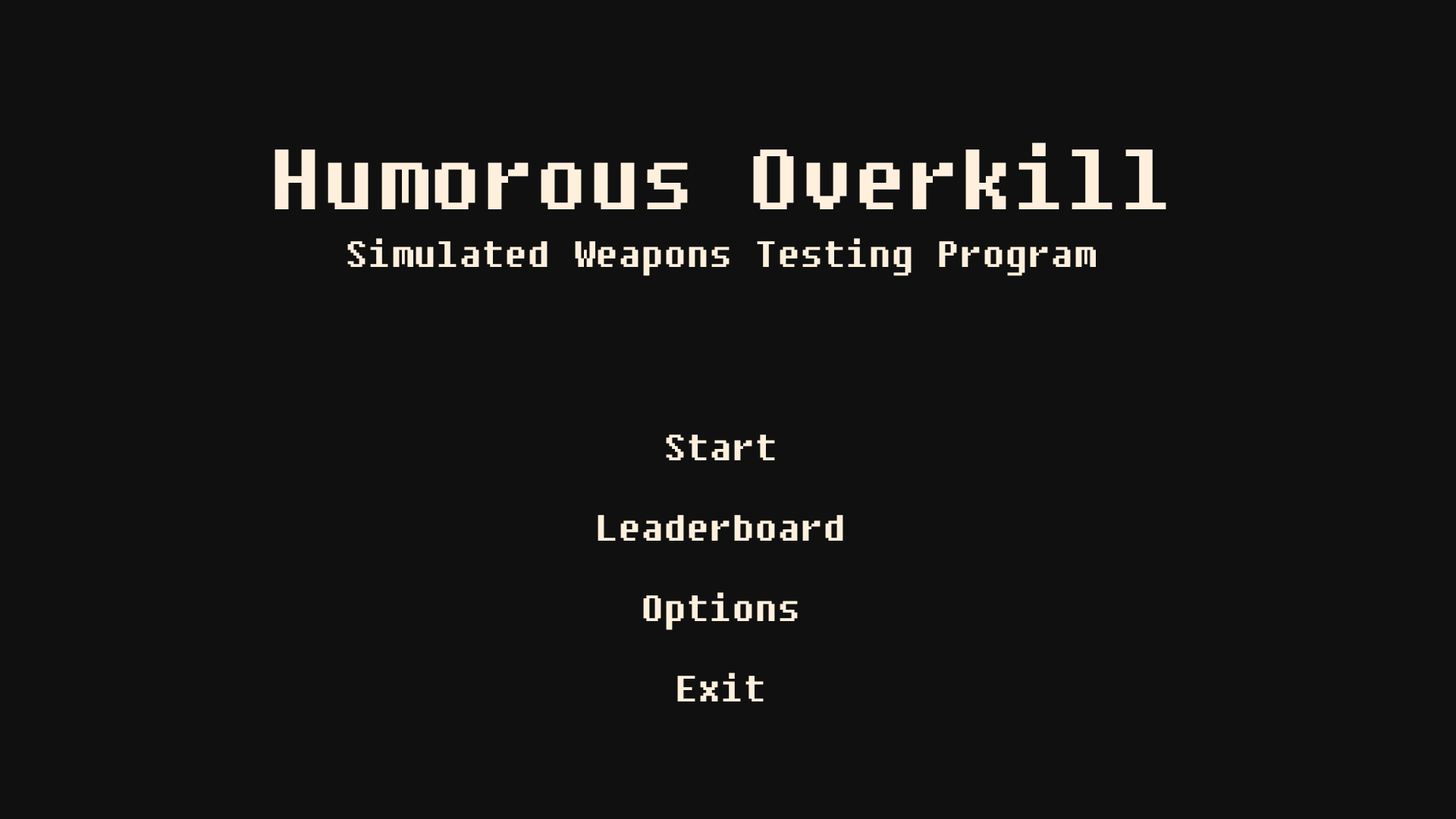
<style>
.page{position:relative;width:1456px;height:819px;background:#101010}
.page>*{position:absolute;margin:0}
.t1{font:85px "Fixedsys";color:#fff0dd}
.t2{font:36.4px "Fixedsys";color:#fff0dd}
</style>
<div class="page">
<p class="t1" style="left:275px;top:143px;width:891px;height:66px">Humorous Overkill</p>
<p class="t2" style="left:347px;top:238px;width:749px;height:38px">Simulated Weapons Testing Program</p>
<p class="t2" style="left:666px;top:435px;width:109px;height:25px">Start</p>
<p class="t2" style="left:598px;top:515px;width:245px;height:26px">Leaderboard</p>
<p class="t2" style="left:643px;top:592px;width:155px;height:38px">Options</p>
<p class="t2" style="left:677px;top:673px;width:87px;height:28px">Exit</p>
</div>
